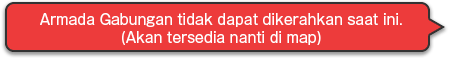
<style>
.page{position:relative;width:450px;height:58px;background:#ed3b3b}
.page>*{position:absolute;margin:0}
.t1{font:14px/18px "GothicMB101Pro-Regular";color:#ffffff}
</style>
<div class="page">
<p class="t1" style="left:40px;top:13px;width:362px;height:32px;text-align:center">Armada Gabungan tidak dapat dikerahkan saat ini.<br>(Akan tersedia nanti di map)</p>
</div>
